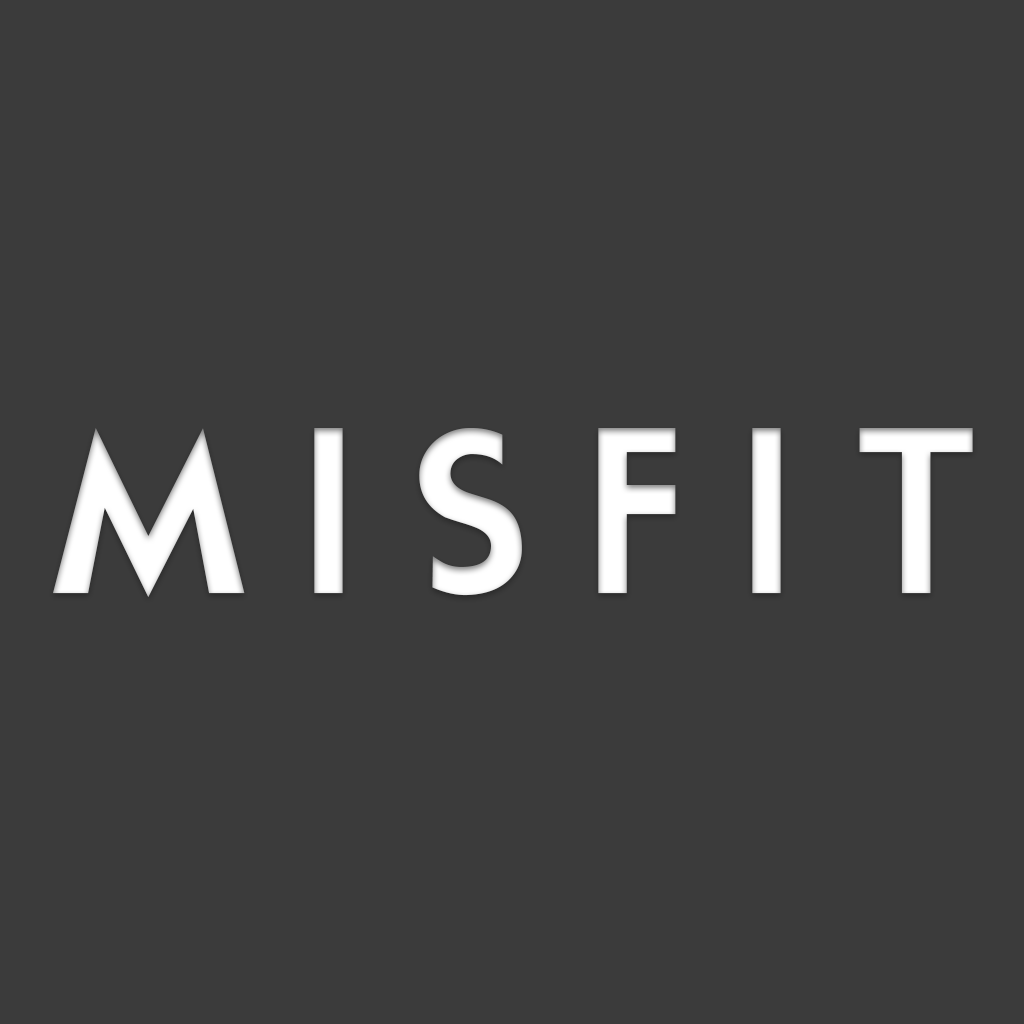
<style>
.page{position:relative;width:1024px;height:1024px;background:#3b3b3b}
.page>*{position:absolute;margin:0}
.t1{font:208.3px "Moderna";letter-spacing:0.3em;color:#ffffff}
</style>
<div class="page">
<p class="t1" style="left:53px;top:428px;width:920px;height:169px">MISFIT</p>
</div>
